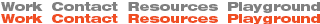
<style>
.page{position:relative;width:320px;height:24px;background:#ffffff}
.page>*{position:absolute;margin:0}
.t1{font:12px "HelveticaNeue-BlackExt";color:#808080}
.t2{font:12px "HelveticaNeue-BlackExt";color:#f04e23}
</style>
<div class="page">
<p class="t1" style="left:1px;top:2px;width:42px;height:9px">Work</p>
<p class="t1" style="left:52px;top:2px;width:66px;height:9px">Contact</p>
<p class="t1" style="left:128px;top:2px;width:90px;height:9px">Resources</p>
<p class="t1" style="left:228px;top:2px;width:92px;height:11px">Playground</p>
<p class="t2" style="left:1px;top:14px;width:42px;height:9px">Work</p>
<p class="t2" style="left:52px;top:14px;width:66px;height:9px">Contact</p>
<p class="t2" style="left:128px;top:14px;width:90px;height:9px">Resources</p>
<p class="t2" style="left:228px;top:14px;width:92px;height:11px">Playground</p>
</div>
